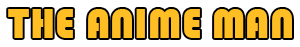
<style>
.page{position:relative;width:300px;height:47px;background:#ffffff}
.page>*{position:absolute;margin:0}
.t1{font:44px "Bauhaus93";color:#ffbe23;scale:0.94 1}
</style>
<div class="page">
<p class="t1" style="left:8px;top:9px;width:284px;height:29px">THE ANIME MAN</p>
</div>
